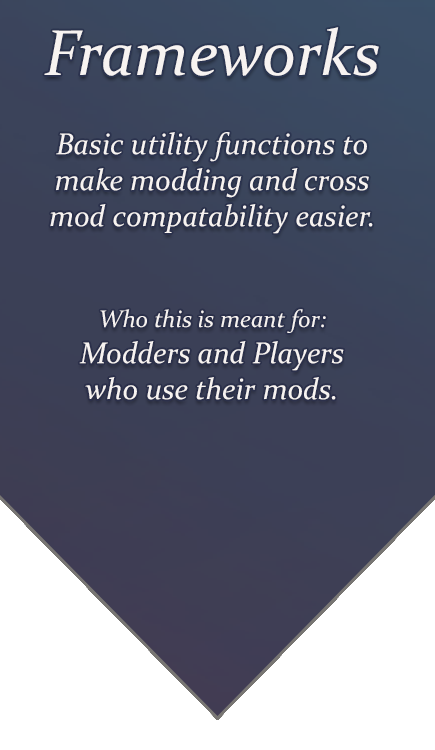
<style>
.page{position:relative;width:435px;height:750px}
.page>*{position:absolute;margin:0}
.t1{font:30px "Constantia-Italic";color:#f7f3f1}
.t2{font:65px "Constantia-Italic";color:#f7f3f1}
.t3{font:24px "Constantia-Italic";color:#f7f3f1}
</style>
<div class="page">
<p class="t1" style="left:44px;top:27px;width:335px;height:373px;text-align:center"><span class="t2">Frameworks<br> <br></span>Basic utility functions to make modding and cross mod compatability easier.<br> <br><br><span class="t3">Who this is meant for: <br></span>Modders and Players <br>who use their mods.</p>
</div>
